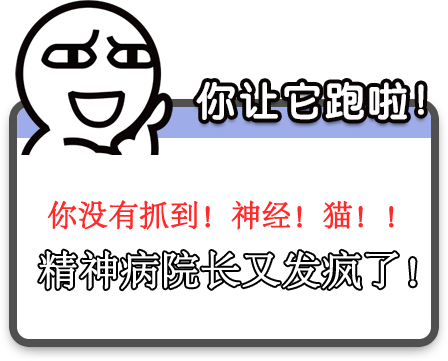
<style>
.page{position:relative;width:448px;height:361px;background:#ffffff}
.page>*{position:absolute;margin:0}
.t1{font:29.8px "AdobeSongStd-Light";color:#ff2a2a;font-weight:bold}
.t2{font:39.4px "AdobeSongStd-Light";color:#ffffff;font-weight:bold}
</style>
<div class="page">
<p class="t1" style="left:47px;top:200px;width:347px;height:30px">你没有抓到！神经！猫！！</p>
<p class="t2" style="left:39px;top:250px;width:377px;height:40px">精神病院长又发疯了！</p>
</div>
